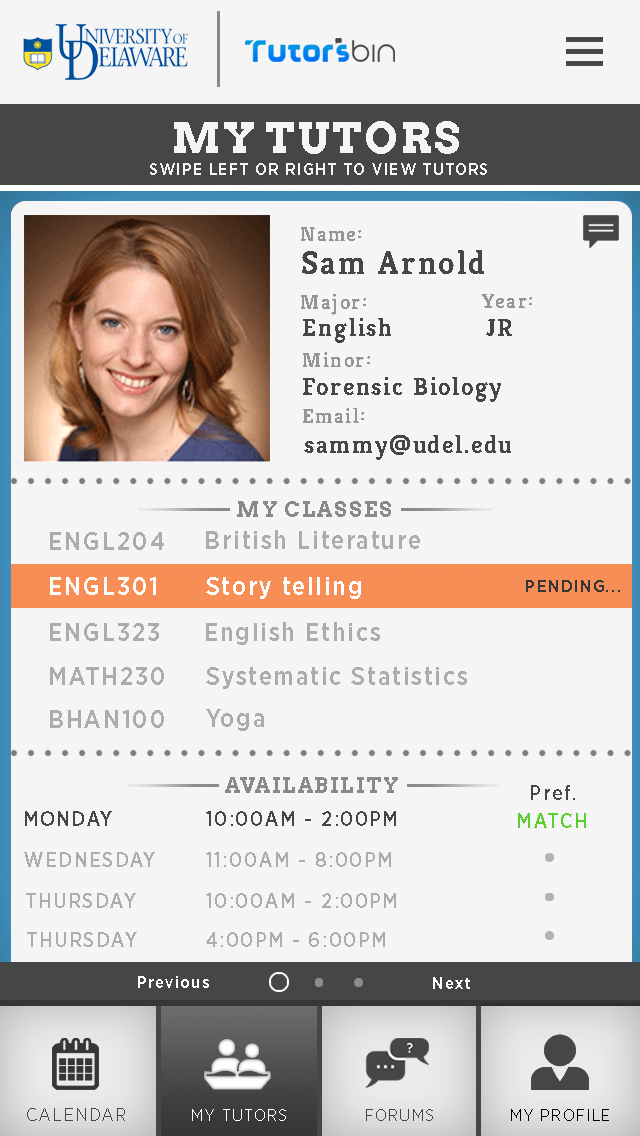
<style>
.page{position:relative;width:640px;height:1136px;background:#f5f5f5}
.page>*{position:absolute;margin:0}
.t1{font:41.7px "Arvo-Bold";letter-spacing:0.075em;color:#f5f5f5}
.t2{font:16.7px "GothamNarrow-Medium";letter-spacing:0.075em;color:#f5f5f5}
.t3{font:20.8px "Kreon-Bold";letter-spacing:0.075em;color:#959595}
.t4{font:33.3px "Kreon-Bold";letter-spacing:0.075em;color:#464646}
.t5{font:25px "Kreon-Bold";letter-spacing:0.075em;color:#464646}
.t6{font:20.8px "Arvo-Bold";letter-spacing:0.075em;color:#898989}
.t7{font:25px "GothamNarrow-Medium";letter-spacing:0.075em;color:#acacac}
.t8{font:25px "GothamNarrow-Medium";letter-spacing:0.075em;color:#fefbfb}
.t9{font:25px "GothamNarrow-Medium";letter-spacing:0.075em;color:#ffffff}
.t10{font:17.2px "GothamNarrow-Medium";letter-spacing:0.075em;color:#363636}
.t11{font:20.8px "GothamNarrow-Medium";letter-spacing:0.075em;color:#464646}
.t12{font:20.8px "GothamNarrow-Medium";letter-spacing:0.075em;color:#58cf2f}
.t13{font:20.8px "GothamNarrow-Medium";letter-spacing:0.075em;color:#acacac}
.t14{font:16.7px "GothamNarrow-Medium";letter-spacing:0.075em;color:#ffffff}
.t15{font:18.4px "GothamNarrow-Light";letter-spacing:0.075em;color:#464646}
.t16{font:16.7px "GothamNarrow-Light";letter-spacing:0.075em;color:#ffffff}
.t17{font:16.7px "GothamNarrow-Light";letter-spacing:0.075em;color:#464646}
.t18{font:16.7px "GothamNarrow-Light";letter-spacing:0.075em;color:#000000}
</style>
<div class="page">
<p class="t1" style="left:174px;top:121px;width:285px;height:33px">MY TUTORS</p>
<p class="t2" style="left:150px;top:163px;width:337px;height:12px">SWIPE LEFT OR RIGHT TO VIEW TUTORS</p>
<p class="t3" style="left:301px;top:227px;width:60px;height:14px">Name:</p>
<p class="t4" style="left:302px;top:250px;width:182px;height:24px">Sam Arnold</p>
<p class="t3" style="left:301px;top:294px;width:65px;height:21px">Major:</p>
<p class="t3" style="left:482px;top:294px;width:50px;height:14px">Year:</p>
<p class="t5" style="left:303px;top:318px;width:88px;height:25px">English</p>
<p class="t5" style="left:486px;top:319px;width:26px;height:17px">JR</p>
<p class="t3" style="left:303px;top:352px;width:67px;height:15px">Minor:</p>
<p class="t5" style="left:303px;top:377px;width:198px;height:25px">Forensic Biology</p>
<p class="t3" style="left:303px;top:408px;width:61px;height:15px">Email:</p>
<p class="t5" style="left:304px;top:435px;width:207px;height:25px">sammy@udel.edu</p>
<p class="t6" style="left:237px;top:501px;width:154px;height:16px">MY CLASSES</p>
<p class="t7" style="left:50px;top:532px;width:114px;height:18px">ENGL204</p>
<p class="t7" style="left:206px;top:530px;width:214px;height:19px">British Literature</p>
<p class="t8" style="left:50px;top:577px;width:106px;height:18px">ENGL301</p>
<p class="t9" style="left:206px;top:577px;width:155px;height:22px">Story telling</p>
<p class="t10" style="left:526px;top:580px;width:94px;height:12px">PENDING...</p>
<p class="t7" style="left:50px;top:623px;width:109px;height:18px">ENGL323</p>
<p class="t7" style="left:206px;top:622px;width:174px;height:23px">English Ethics</p>
<p class="t7" style="left:50px;top:667px;width:114px;height:18px">MATH230</p>
<p class="t7" style="left:206px;top:667px;width:261px;height:22px">Systematic Statistics</p>
<p class="t7" style="left:50px;top:710px;width:114px;height:18px">BHAN100</p>
<p class="t7" style="left:206px;top:709px;width:58px;height:22px">Yoga</p>
<p class="t6" style="left:225px;top:777px;width:173px;height:16px">AVAILABILITY</p>
<p class="t11" style="left:531px;top:785px;width:44px;height:15px">Pref.</p>
<p class="t11" style="left:25px;top:811px;width:87px;height:15px">MONDAY</p>
<p class="t11" style="left:206px;top:811px;width:190px;height:15px">10:00AM - 2:00PM</p>
<p class="t12" style="left:518px;top:813px;width:68px;height:15px">MATCH</p>
<p class="t13" style="left:24px;top:852px;width:131px;height:15px">WEDNESDAY</p>
<p class="t13" style="left:206px;top:852px;width:185px;height:15px">11:00AM - 8:00PM</p>
<p class="t13" style="left:26px;top:893px;width:110px;height:15px">THURSDAY</p>
<p class="t13" style="left:206px;top:893px;width:190px;height:15px">10:00AM - 2:00PM</p>
<p class="t13" style="left:27px;top:932px;width:110px;height:15px">THURSDAY</p>
<p class="t13" style="left:206px;top:932px;width:179px;height:15px">4:00PM - 6:00PM</p>
<p class="t14" style="left:138px;top:976px;width:71px;height:12px">Previous</p>
<p class="t14" style="left:433px;top:977px;width:37px;height:12px">Next</p>
<p class="t15" style="left:27px;top:1108px;width:98px;height:13px">CALENDAR</p>
<p class="t16" style="left:192px;top:1109px;width:94px;height:12px">MY TUTORS</p>
<p class="t17" style="left:366px;top:1109px;width:67px;height:12px">FORUMS</p>
<p class="t18" style="left:511px;top:1109px;width:98px;height:12px">MY PROFILE</p>
</div>
